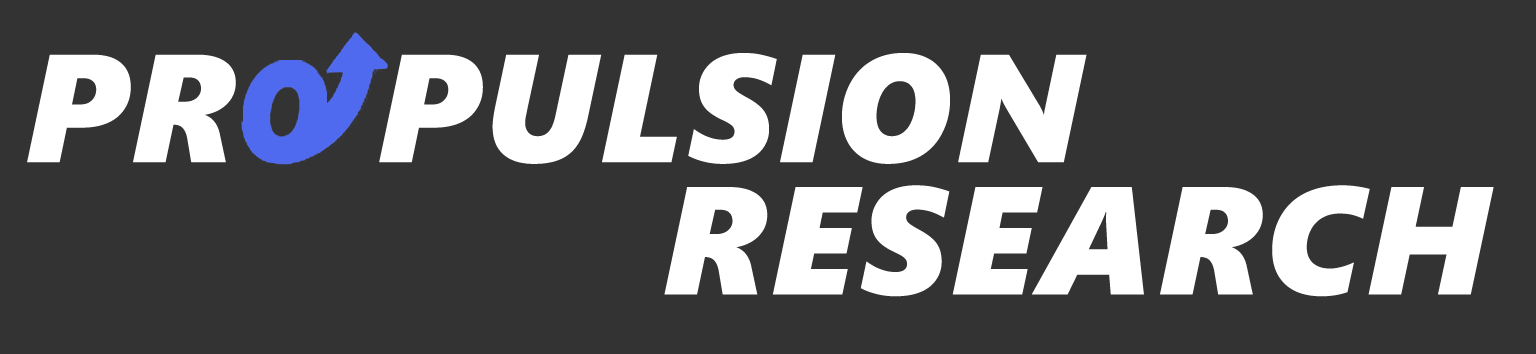
<style>
.page{position:relative;width:1536px;height:354px;background:#333333}
.page>*{position:absolute;margin:0}
.t1{font:153.2px "SegoeUIBlack-Italic";letter-spacing:0.025em;color:#ffffff}
.t2{font:153.3px "SegoeUIBlack-Italic";letter-spacing:0.025em;color:#ffffff}
</style>
<div class="page">
<p class="t1" style="left:27px;top:53px;width:1060px;height:111px">PR   PULSION</p>
<p class="t2" style="left:664px;top:185px;width:830px;height:112px">RESEARCH</p>
</div>
